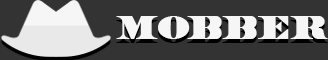
<style>
.page{position:relative;width:328px;height:60px;background:#333333}
.page>*{position:absolute;margin:0}
.t1{font:31.2px "UnitedStates";letter-spacing:0.07em;color:#f6f6f6;text-transform:uppercase}
</style>
<div class="page">
<p class="t1" style="left:116px;top:16px;width:212px;height:23px">mobber</p>
<p class="t1" style="left:116px;top:20px;width:212px;height:23px">mobber</p>
</div>
